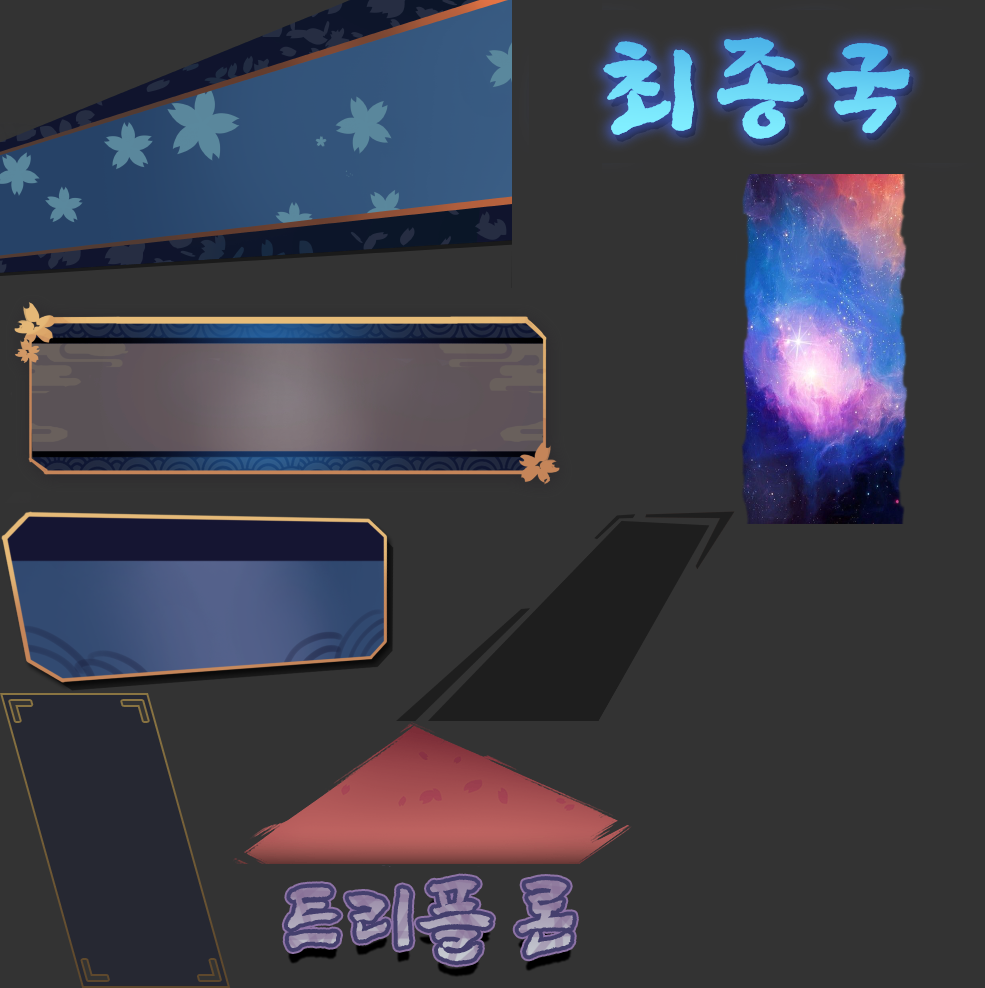
<style>
.page{position:relative;width:985px;height:988px;background:#333333}
.page>*{position:absolute;margin:0}
.t1{font:109.7px "SangSangRockOTF";letter-spacing:0.2em;color:#6cd7f7;font-weight:bold}
.t2{font:91px "SangSangRockOTF";letter-spacing:0.1em}
.t3{font:84.1px "SangSangRockOTF";letter-spacing:0.32em}
.t4{font:91px "SangSangRockOTF";letter-spacing:0.32em}
</style>
<div class="page">
<p class="t1" style="left:603px;top:37px;width:307px;height:102px">최종국</p>
<p class="t1" style="left:603px;top:37px;width:307px;height:102px">최종국</p>
<p class="t2" style="left:287px;top:879px;width:286px;height:83px">트리<span class="t3">플</span><span class="t4">론</span></p>
</div>
